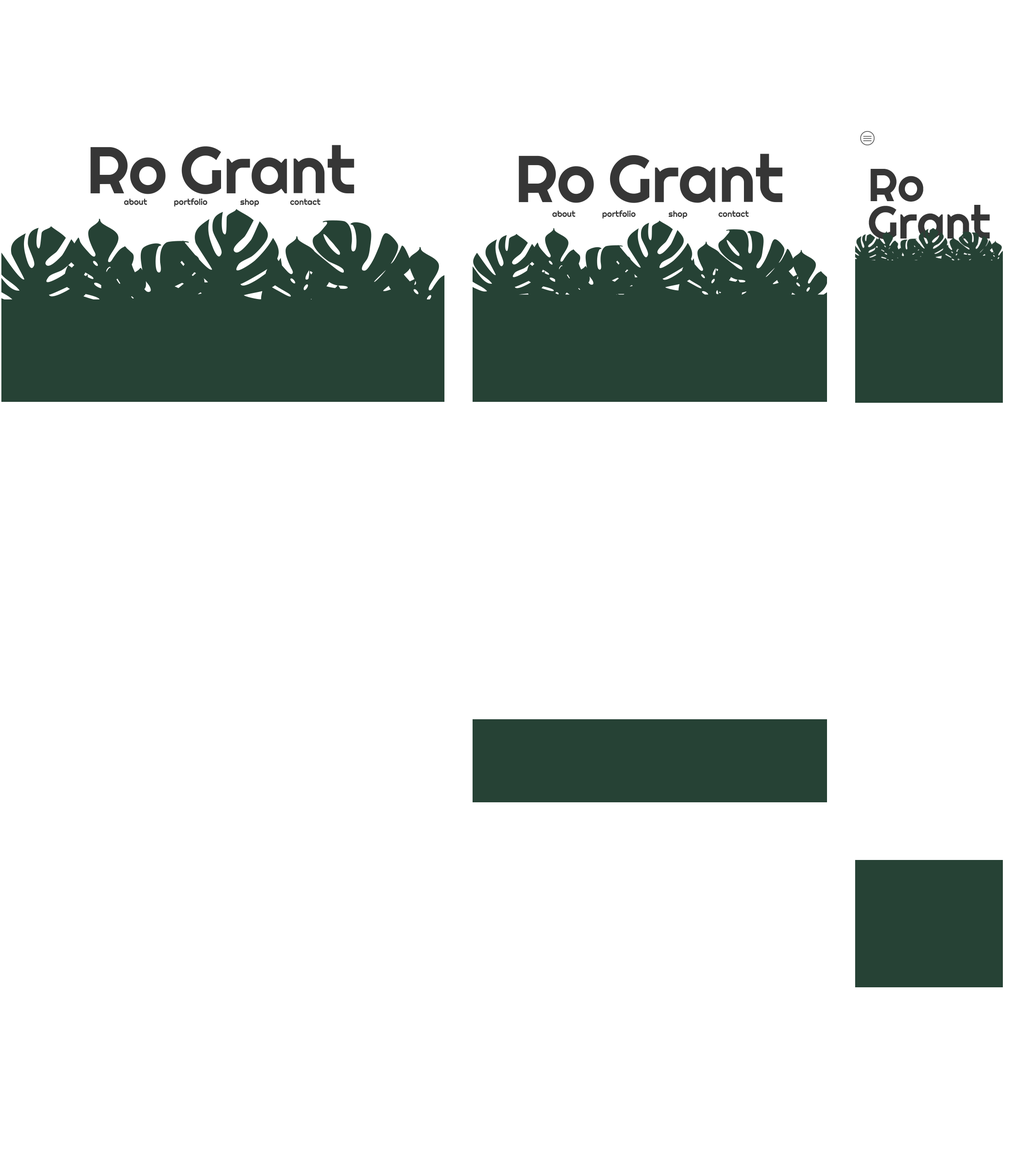
<style>
.page{position:relative;width:1019px;height:1170px;background:#ffffff}
.page>*{position:absolute;margin:0}
.t1{font:65.9px "Righteous-Regular";color:#363636}
.t2{font:46.1px/37.4px "Righteous-Regular";color:#363636}
.t3{font:8.3px "Righteous-Regular";color:#363636}
</style>
<div class="page">
<p class="t1" style="left:90px;top:145px;width:264px;height:49px">Ro Grant</p>
<p class="t1" style="left:519px;top:154px;width:264px;height:49px">Ro Grant</p>
<p class="t2" style="left:868px;top:169px;width:122px;height:71px">Ro <br>Grant</p>
<p class="t3" style="left:124px;top:198px;width:196px;height:9px">about   portfolio  shop  contact</p>
<p class="t3" style="left:552px;top:210px;width:197px;height:9px">about   portfolio  shop  contact</p>
</div>
